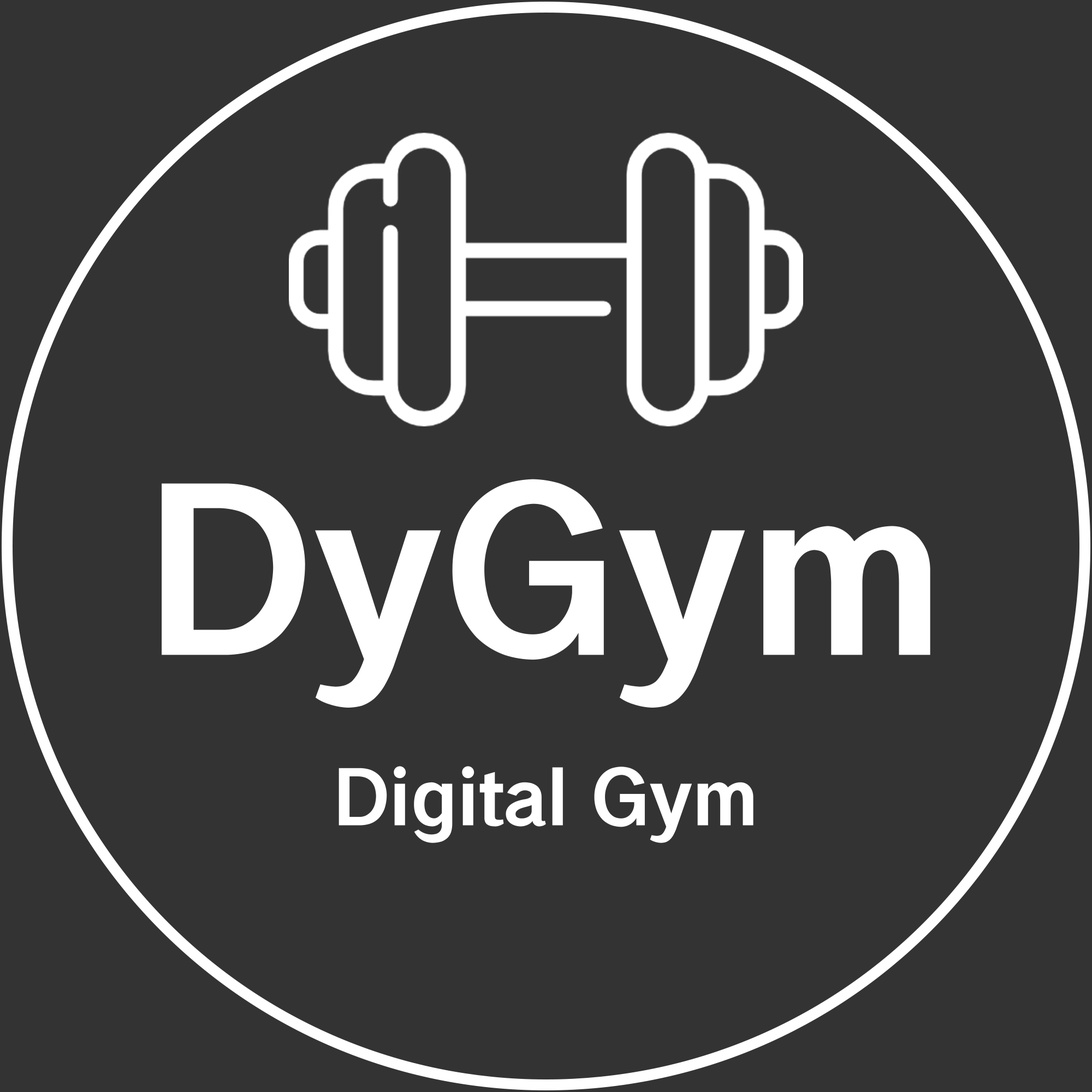
<style>
.page{position:relative;width:1092px;height:1092px;background:#333333}
.page>*{position:absolute;margin:0}
.t1{font:227.5px "HYWenHei-HEW";color:#ffffff}
.t2{font:75.8px "HYWenHei-HEW";color:#ffffff}
</style>
<div class="page">
<p class="t1" style="left:162px;top:479px;width:768px;height:229px">DyGym</p>
<p class="t2" style="left:339px;top:766px;width:414px;height:77px">Digital Gym</p>
</div>
